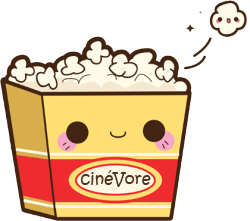
<style>
.page{position:relative;width:250px;height:221px;background:#ffffff}
.page>*{position:absolute;margin:0}
.t1{font:16px "KristenITC-Regular";color:#4e321f}
</style>
<div class="page">
<p class="t1" style="left:80px;top:170px;width:71px;height:17px">cinéVore</p>
</div>
